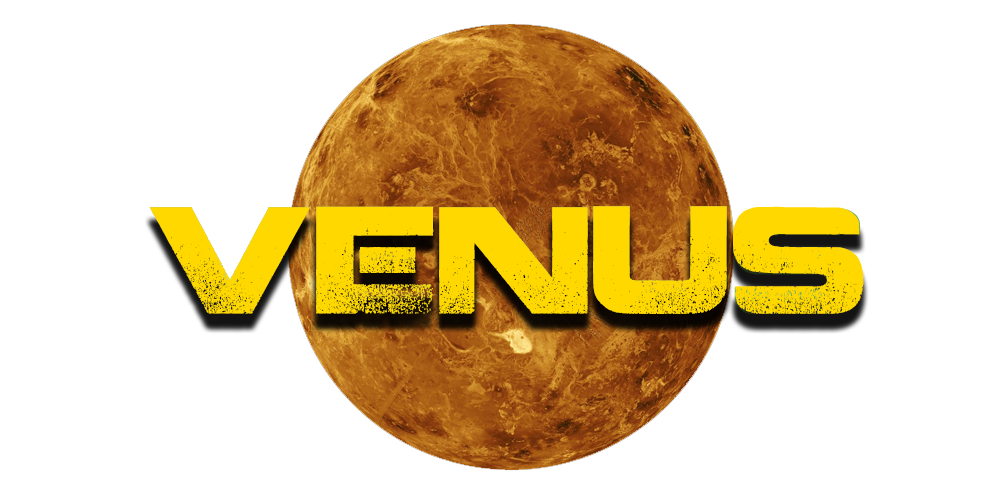
<style>
.page{position:relative;width:1000px;height:500px;background:#ffffff}
.page>*{position:absolute;margin:0}
.t1{font:150px "Coalition";color:#ffd800}
</style>
<div class="page">
<p class="t1" style="left:149px;top:206px;width:714px;height:108px">VENUs</p>
<p class="t1" style="left:149px;top:206px;width:715px;height:108px">VENUS</p>
</div>
